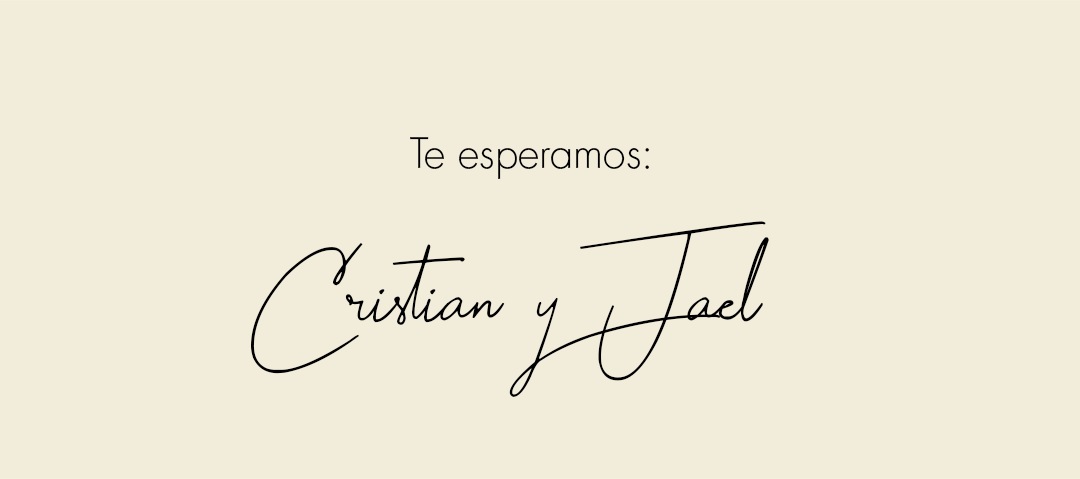
<style>
.page{position:relative;width:1080px;height:479px;background:#f2ecda}
.page>*{position:absolute;margin:0}
.t1{font:41.3px "Futura-Light";color:#000000}
.t2{font:213.3px "Harmony";color:#000000}
</style>
<div class="page">
<p class="t1" style="left:410px;top:137px;width:239px;height:42px">Te esperamos:</p>
<p class="t2" style="left:251px;top:221px;width:518px;height:176px">Cristian y Jael</p>
</div>
